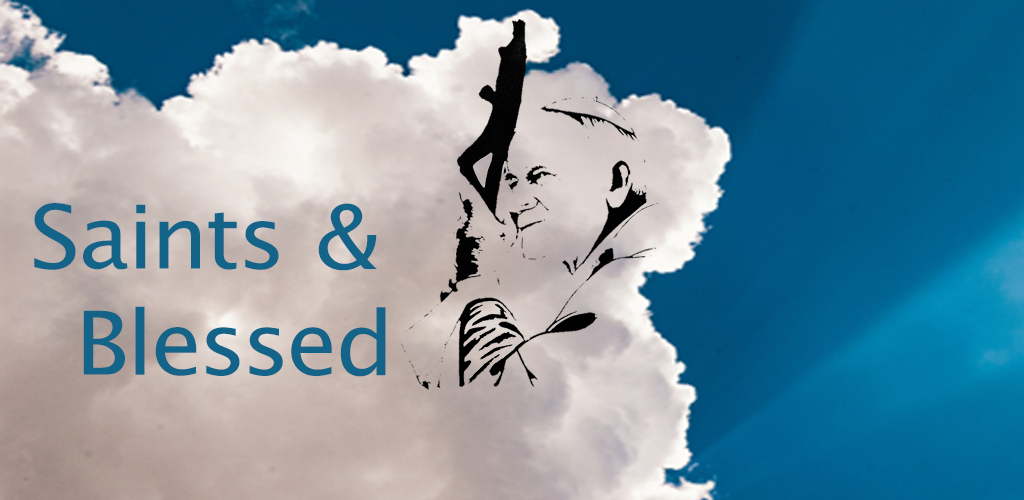
<style>
.page{position:relative;width:1024px;height:500px}
.page>*{position:absolute;margin:0}
.t1{font:88.3px "LucidaSansUnicode";color:#146389;scale:1.06 1}
</style>
<div class="page">
<p class="t1" style="left:34px;top:203px;width:352px;height:174px;text-align:center">Saints &amp;<br>  Blessed</p>
</div>
